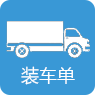
<style>
.page{position:relative;width:95px;height:95px;background:#3998d6}
.page>*{position:absolute;margin:0}
.t1{font:18px "MicrosoftYaHei";color:#ffffff}
</style>
<div class="page">
<p class="t1" style="left:21px;top:66px;width:54px;height:19px">装车单</p>
</div>
